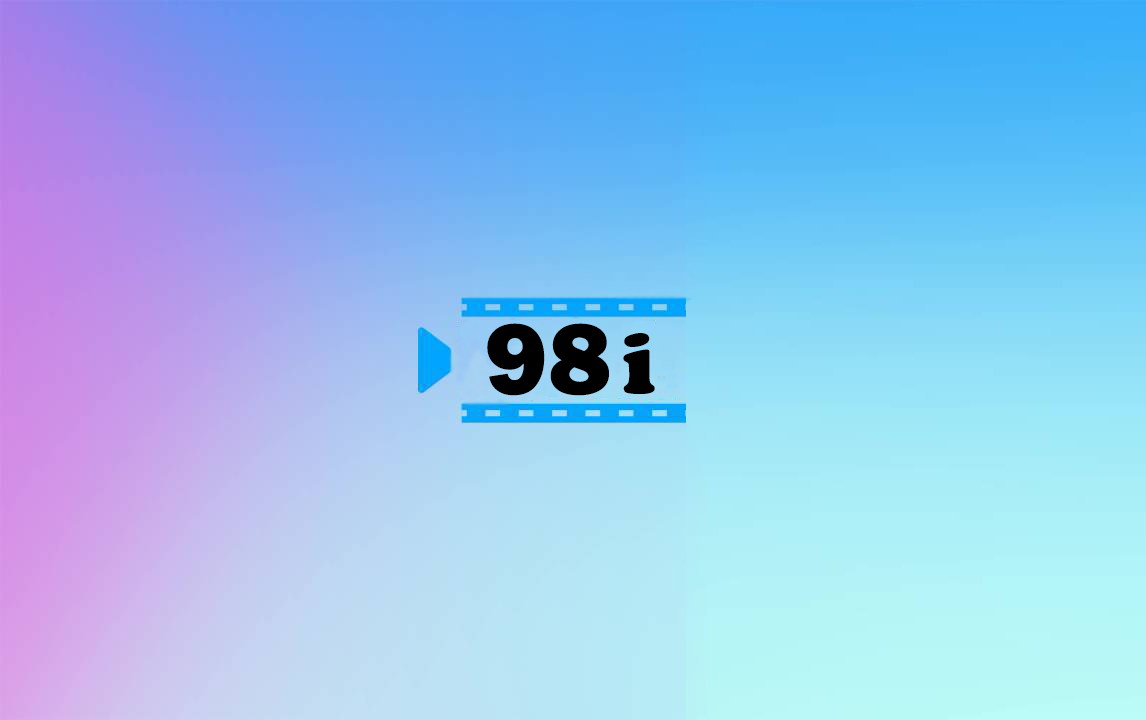
<style>
.page{position:relative;width:1146px;height:720px}
.page>*{position:absolute;margin:0}
.t1{font:104px "FranklinGothic-Heavy";letter-spacing:0.01em;color:#000000;scale:1.03 1}
.t2{font:90px "CooperBlack";letter-spacing:0.025em;color:#000000;scale:1.03 1}
</style>
<div class="page">
<p class="t1" style="left:487px;top:323px;width:122px;height:73px">98</p>
<p class="t2" style="left:623px;top:333px;width:32px;height:61px">i</p>
</div>
